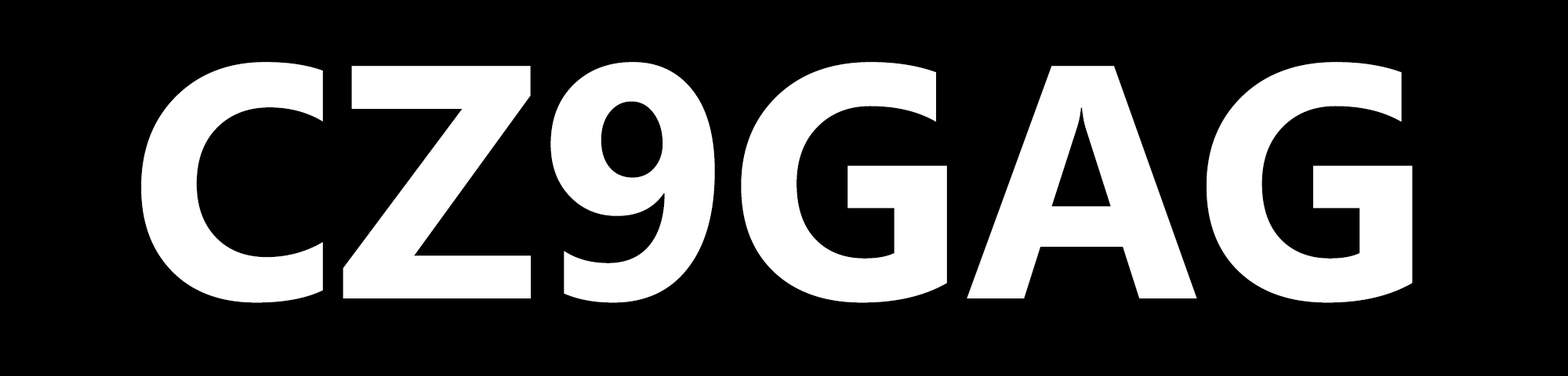
<style>
.page{position:relative;width:1568px;height:376px;background:#000000}
.page>*{position:absolute;margin:0}
.t1{font:331.9px "LaoUI-Bold";color:#ffffff}
</style>
<div class="page">
<p class="t1" style="left:141px;top:62px;width:1272px;height:241px">CZ9GAG</p>
</div>
